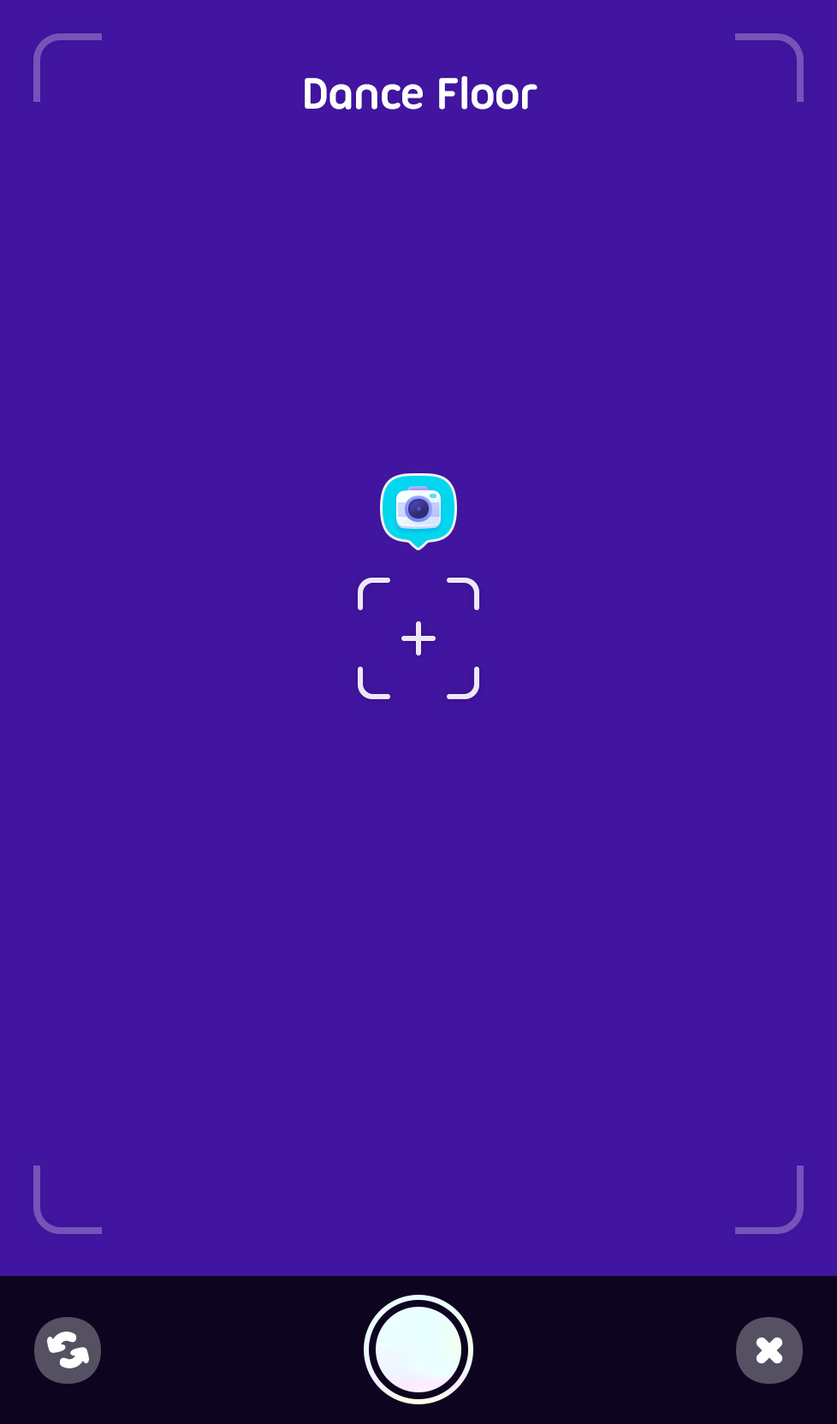
<style>
.page{position:relative;width:837px;height:1424px;background:#4115a0}
.page>*{position:absolute;margin:0}
.t1{font:47.9px "UbuntuTitling-Bold";letter-spacing:-0.025em;color:#ffffff}
</style>
<div class="page">
<p class="t1" style="left:305px;top:76px;width:233px;height:34px">Dance Floor</p>
</div>
